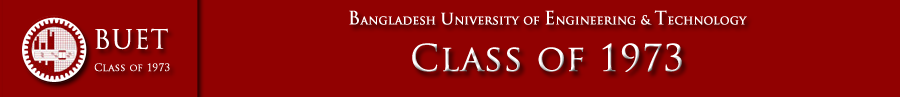
<style>
.page{position:relative;width:900px;height:97px;background:#910101}
.page>*{position:absolute;margin:0}
.t1{font:12px "TrajanPro-Regular";color:#ffffff;font-weight:bold}
.t2{font:18px "TrajanPro-Regular";color:#ffffff;font-weight:bold}
.t3{font:26px "TrajanPro-Regular";color:#fefefe;font-weight:bold}
.t4{font:36px "TrajanPro-Regular";color:#ffffff;font-weight:bold}
.t5{font:10px "TrajanPro-Regular";color:#fefefe;font-weight:bold}
</style>
<div class="page">
<p class="t1" style="left:349px;top:10px;width:398px;height:15px"><span class="t2">B</span>angladesh <span class="t2">u</span>niversity of <span class="t2">E</span>ngineering &amp; <span class="t2">T</span>echnology</p>
<p class="t3" style="left:95px;top:28px;width:73px;height:22px">BUET</p>
<p class="t4" style="left:412px;top:43px;width:270px;height:29px">Class of 1973</p>
<p class="t5" style="left:94px;top:63px;width:76px;height:9px">Class of 1973</p>
</div>
